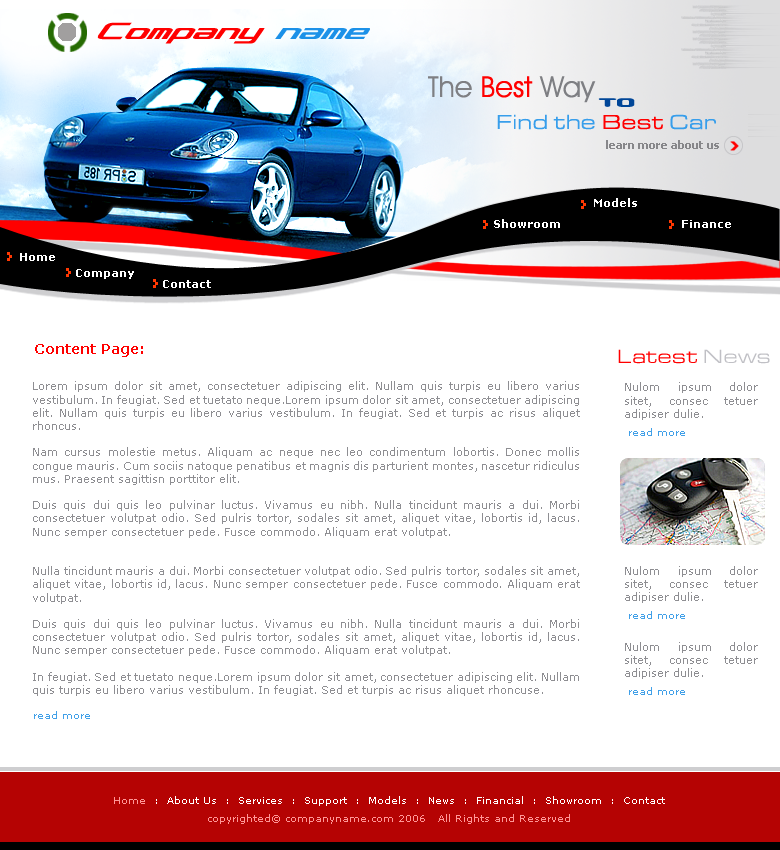
<style>
.page{position:relative;width:780px;height:850px;background:#ffffff}
.page>*{position:absolute;margin:0}
.t1{font:30px "Concielian";color:#ff0000}
.t2{font:30px "Concielian";color:#1c91e8}
.t3{font:29px "AvantGardeITCbyBT-Book";color:#ff0000}
.t4{font:29px "AvantGardeITCbyBT-Book";color:#7e7f83}
.t5{font:22px "Beware";color:#004698}
.t6{font:21px "EurostileExtended-Roman-DTC";color:#379eeb}
.t7{font:21px "EurostileExtended-Roman-DTC";color:#ff0000}
.t8{font:11px "Tahoma-Bold";color:#87878a}
.t9{font:11px "Verdana-Bold";color:#ffffff}
.t10{font:14px "Verdana-Bold";color:#ff0000}
.t11{font:20px "EurostileExtended-Roman-DTC";color:#ff0000}
.t12{font:20px "EurostileExtended-Roman-DTC";color:#c0c0c5}
.t13{font:11px "Verdana";color:#8e8e92}
.t14{font:10px "Verdana";color:#41a0e8}
.t15{font:10px/18px "Verdana";color:#ffffff}
.t16{font:10px/18px "Verdana";color:#ff9797}
</style>
<div class="page">
<p class="t1" style="left:97px;top:22px;width:273px;height:22px">Company <span class="t2">name</span></p>
<p class="t3" style="left:428px;top:76px;width:168px;height:27px"><span class="t4">The </span>Best<span class="t4"> Way</span></p>
<p class="t5" style="left:598px;top:98px;width:37px;height:9px">to</p>
<p class="t6" style="left:497px;top:114px;width:219px;height:16px">Find the <span class="t7">Best </span>Car</p>
<p class="t8" style="left:606px;top:140px;width:113px;height:9px">learn more about us</p>
<p class="t9" style="left:594px;top:198px;width:43px;height:9px">Models</p>
<p class="t9" style="left:494px;top:219px;width:66px;height:9px">Showroom</p>
<p class="t9" style="left:682px;top:220px;width:49px;height:8px">Finance</p>
<p class="t9" style="left:20px;top:253px;width:35px;height:8px">Home</p>
<p class="t9" style="left:76px;top:269px;width:58px;height:10px">Company</p>
<p class="t9" style="left:163px;top:280px;width:48px;height:8px">Contact</p>
<p class="t10" style="left:35px;top:344px;width:108px;height:13px">Content Page:</p>
<p class="t11" style="left:618px;top:349px;width:152px;height:15px">Latest <span class="t12">News</span></p>
<p class="t13" style="left:33px;top:381px;width:547px;height:315px;text-align:justify">Lorem ipsum dolor sit amet, consectetuer adipiscing elit. Nullam quis turpis eu libero varius vestibulum. In feugiat. Sed et tuetato neque.Lorem ipsum dolor sit amet, consectetuer adipiscing elit. Nullam quis turpis eu libero varius vestibulum. In feugiat. Sed et turpis ac risus aliquet rhoncus. <br><br>Nam cursus molestie metus. Aliquam ac neque nec leo condimentum lobortis. Donec mollis congue mauris. Cum sociis natoque penatibus et magnis dis parturient montes, nascetur ridiculus mus. Praesent sagittisn porttitor elit. <br><br>Duis quis dui quis leo pulvinar luctus. Vivamus eu nibh. Nulla tincidunt mauris a dui. Morbi consectetuer volutpat odio. Sed pulris tortor, sodales sit amet, aliquet vitae, lobortis id, lacus. Nunc semper consectetuer pede. Fusce commodo. Aliquam erat volutpat.<br><br><br>Nulla tincidunt mauris a dui. Morbi consectetuer volutpat odio. Sed pulris tortor, sodales sit amet, aliquet vitae, lobortis id, lacus. Nunc semper consectetuer pede. Fusce commodo. Aliquam erat volutpat.<br><br>Duis quis dui quis leo pulvinar luctus. Vivamus eu nibh. Nulla tincidunt mauris a dui. Morbi consectetuer volutpat odio. Sed pulris tortor, sodales sit amet, aliquet vitae, lobortis id, lacus. Nunc semper consectetuer pede. Fusce commodo. Aliquam erat volutpat.<br><br>In feugiat. Sed et tuetato neque.Lorem ipsum dolor sit amet, consectetuer adipiscing elit. Nullam quis turpis eu libero varius vestibulum. In feugiat. Sed et turpis ac risus aliquet rhoncuse.</p>
<p class="t14" style="left:34px;top:711px;width:56px;height:8px">read more</p>
<p class="t15" style="left:114px;top:796px;width:551px;height:28px;text-align:center"><span class="t16">Home</span>  :  About Us  :  Services  :  Support  :  Models  :  News  :  Financial  :  Showroom  :  Contact<br><span class="t16">copyrighted© companyname.com 2006   All Rights and Reserved</span></p>
</div>
